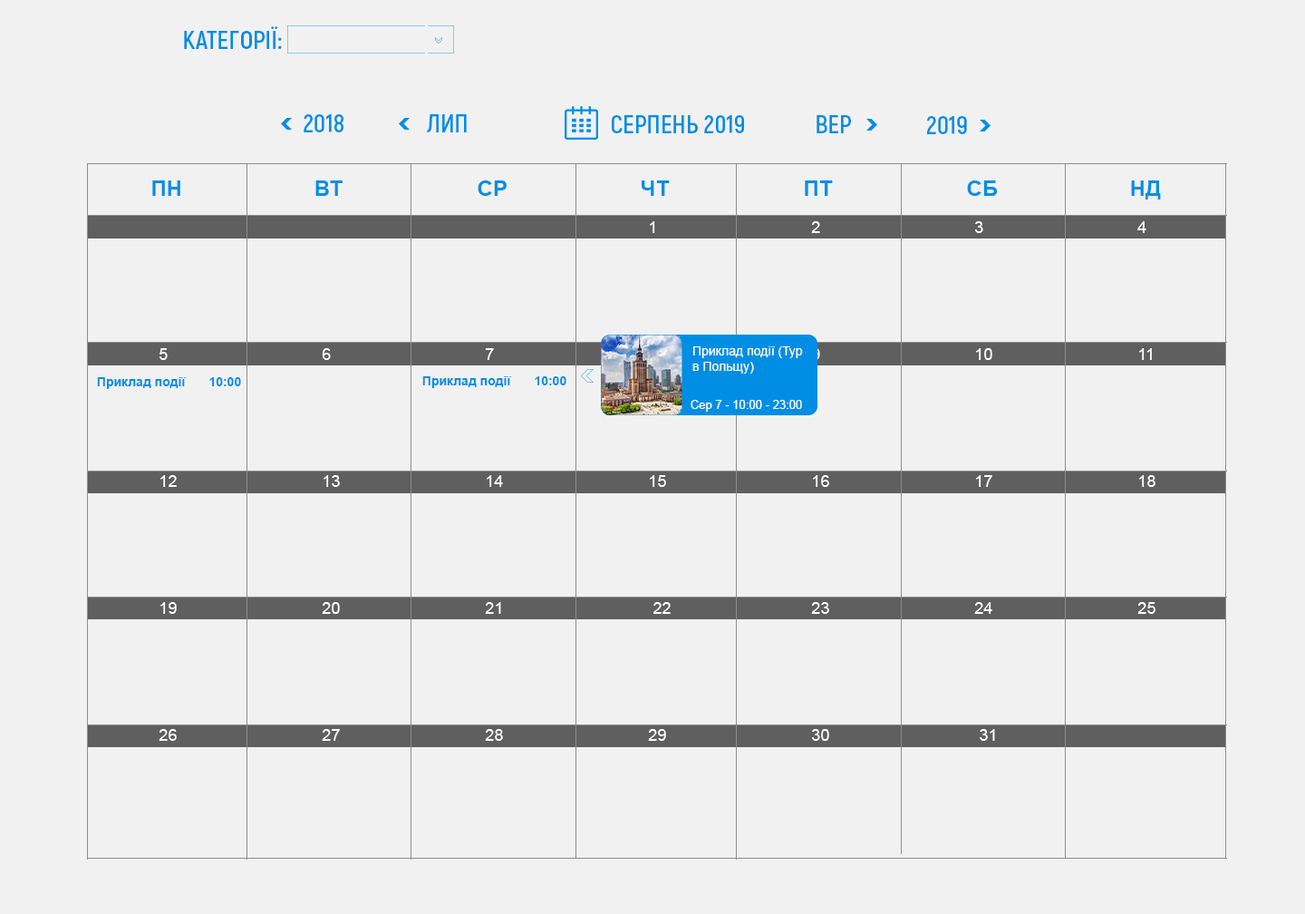
<style>
.page{position:relative;width:1305px;height:914px;background:#f1f1f1}
.page>*{position:absolute;margin:0}
.t1{font:25.4px "Akrobat-Bold";color:#008ee5;text-transform:uppercase}
.t2{font:21.8px "Arial-BoldMT";letter-spacing:0.002em;color:#008ee5;text-transform:uppercase}
.t3{font:12.7px "ArialMT";letter-spacing:0.002em;color:#ffffff}
.t4{font:12.7px "Arial-BoldMT";color:#008ee5}
.t5{font:11.8px "ArialMT";letter-spacing:0.002em;color:#ffffff}
</style>
<div class="page">
<p class="t1" style="left:184px;top:26px;width:98px;height:23px">категорії:</p>
<p class="t1" style="left:304px;top:114px;width:40px;height:18px">2018</p>
<p class="t1" style="left:427px;top:114px;width:40px;height:18px">ЛИП</p>
<p class="t1" style="left:612px;top:115px;width:132px;height:18px">сЕРПЕНЬ 2019</p>
<p class="t1" style="left:817px;top:115px;width:34px;height:18px">ВЕР</p>
<p class="t1" style="left:927px;top:116px;width:40px;height:18px">2019</p>
<p class="t2" style="left:152px;top:180px;width:1009px;height:19px">пн     вт     ср     чт     пт     сб     нд</p>
<p class="t3" style="left:692px;top:346px;width:111px;height:27px">Приклад події (Тур<br>в Польщу)</p>
<p class="t4" style="left:97px;top:377px;width:144px;height:12px">Приклад події     10:00</p>
<p class="t4" style="left:422px;top:376px;width:144px;height:12px">Приклад події     10:00</p>
<p class="t5" style="left:691px;top:400px;width:111px;height:11px">Сер 7 - 10:00 - 23:00</p>
</div>
